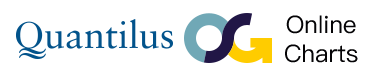
<style>
.page{position:relative;width:368px;height:77px;background:#ffffff}
.page>*{position:absolute;margin:0}
.t1{font:24.2px "PingFang-SC-Medium";color:#050406}
</style>
<div class="page">
<p class="t1" style="left:285px;top:15px;width:73px;height:48px;text-align:center">Online<br>Charts</p>
</div>
